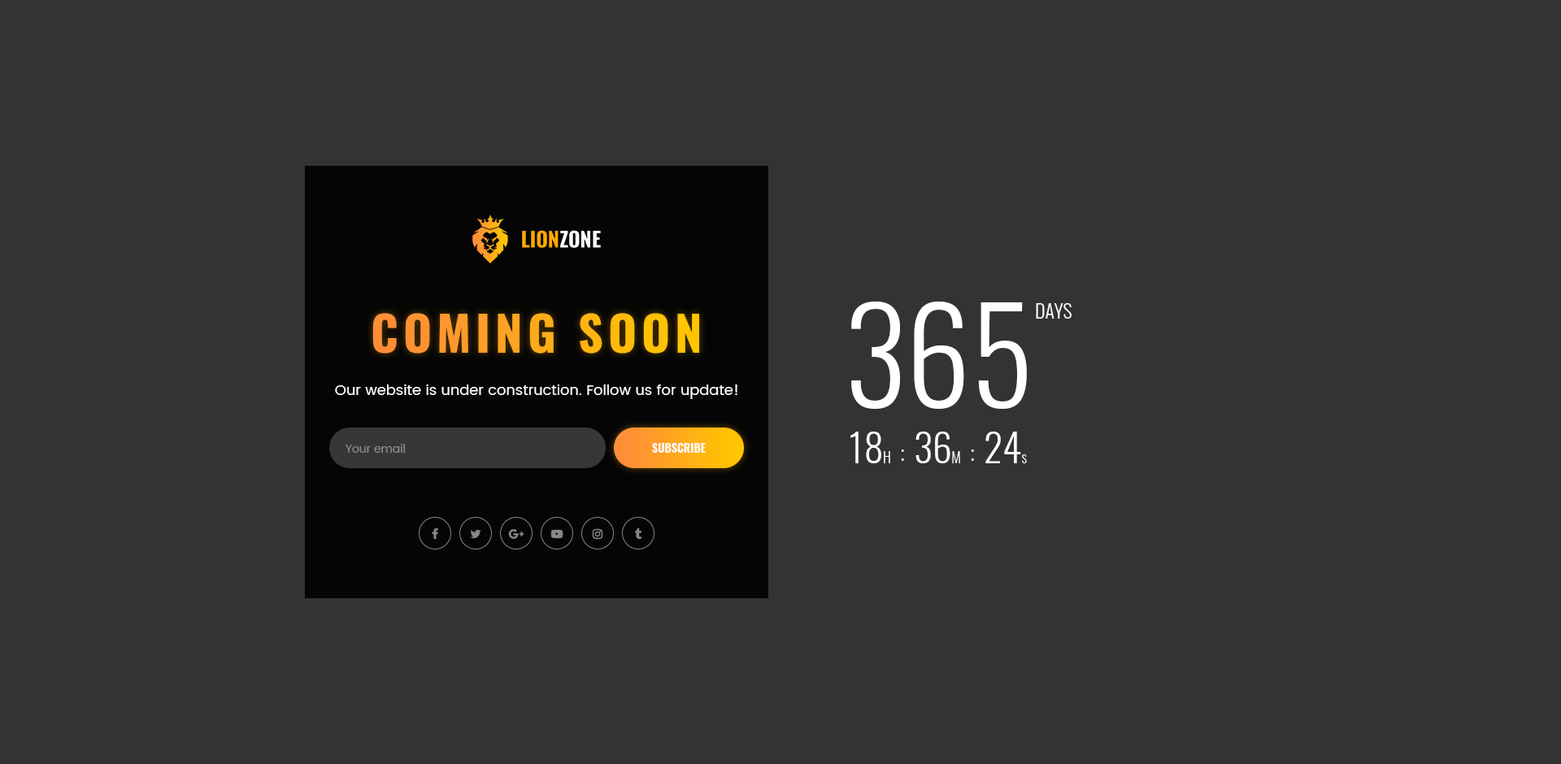
<style>
.page{position:relative;width:1561px;height:764px;background:#333333}
.page>*{position:absolute;margin:0}
.t1{font:130.1px "Oswald-Light";color:#ffffff;text-transform:uppercase}
.t2{font:19.5px "Oswald-Light";color:#ffffff;text-transform:uppercase}
.t3{font:48.8px "Oswald-Bold";letter-spacing:0.1em;text-transform:uppercase}
.t4{font:14.6px "Poppins-Regular";color:#ffffff}
.t5{font:39px "Oswald-Light";color:#ffffff}
.t6{font:14.6px "Oswald-Light";color:#ffffff}
.t7{font:24.4px "Oswald-Light";color:#ffffff}
.t8{font:11.4px "Poppins-Regular";color:#878787}
.t9{font:11.4px "Oswald-Bold";color:#ffffff;text-transform:uppercase}
</style>
<div class="page">
<p class="t1" style="left:851px;top:302px;width:176px;height:107px">365</p>
<p class="t2" style="left:1036px;top:303px;width:35px;height:16px">days</p>
<p class="t3" style="left:372px;top:313px;width:327px;height:41px">coming soon</p>
<p class="t4" style="left:335px;top:384px;width:402px;height:15px">Our website is under construction. Follow us for update!</p>
<p class="t5" style="left:850px;top:432px;width:177px;height:31px">18<span class="t6">H   </span><span class="t7">:   </span>36<span class="t6">M   </span><span class="t7">:   </span>24<span class="t6">s</span></p>
<p class="t8" style="left:345px;top:444px;width:60px;height:9px">Your email</p>
<p class="t9" style="left:652px;top:443px;width:54px;height:10px">subscribe</p>
</div>
